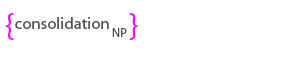
<style>
.page{position:relative;width:300px;height:60px;background:#ffffff}
.page>*{position:absolute;margin:0}
.t1{font:33.3px "MyriadPro-Regular";color:#f30df6}
.t2{font:16.7px "MyriadPro-Regular";color:#525252}
.t3{font:12.5px "MyriadPro-Regular";color:#525252}
</style>
<div class="page">
<p class="t1" style="left:6px;top:13px;width:8px;height:27px">{</p>
<p class="t2" style="left:15px;top:17px;width:94px;height:12px">consolidation</p>
<p class="t1" style="left:129px;top:13px;width:9px;height:27px">}</p>
<p class="t3" style="left:112px;top:28px;width:15px;height:9px">NP</p>
</div>
